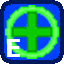
<style>
.page{position:relative;width:64px;height:64px;background:#0042ff}
.page>*{position:absolute;margin:0}
.t1{font:24px "Verdana-Bold";color:#ffffff}
</style>
<div class="page">
<p class="t1" style="left:7px;top:39px;width:13px;height:18px">E</p>
</div>
